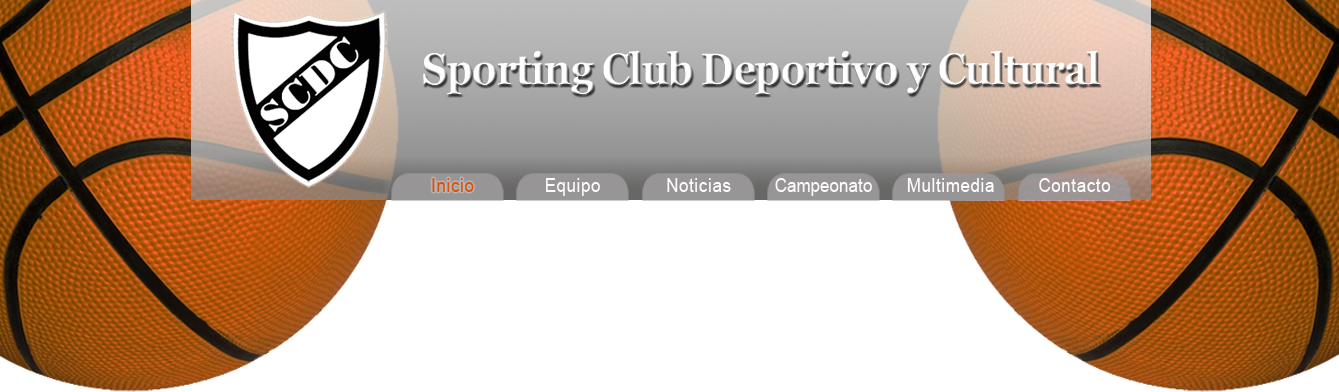
<style>
.page{position:relative;width:1339px;height:392px;background:#ffffff}
.page>*{position:absolute;margin:0}
.t1{font:44.9px "Vani-Bold";letter-spacing:-0.025em;color:#ffffff;scale:0.89 1}
.t2{font:18.6px "ArialMT";letter-spacing:0.05em;color:#da510d;scale:0.89 1}
.t3{font:18.6px "ArialMT";letter-spacing:0.05em;color:#fefdfc;scale:0.89 1}
.t4{font:18.6px "ArialMT";letter-spacing:0.05em;color:#fefcfb;scale:0.89 1}
.t5{font:18.6px "ArialMT";letter-spacing:0.02em;color:#fbfbfb;scale:0.89 1}
.t6{font:18.6px "ArialMT";letter-spacing:0.05em;color:#ffffff;scale:0.89 1}
.t7{font:18.6px "ArialMT";letter-spacing:0.05em;color:#fdfcfb;scale:0.89 1}
</style>
<div class="page">
<p class="t1" style="left:423px;top:51px;width:677px;height:44px">Sporting Club Deportivo y Cultural</p>
<p class="t2" style="left:432px;top:178px;width:42px;height:14px">Inicio</p>
<p class="t3" style="left:546px;top:178px;width:54px;height:18px">Equipo</p>
<p class="t4" style="left:667px;top:178px;width:64px;height:14px">Noticias</p>
<p class="t5" style="left:775px;top:178px;width:97px;height:18px">Campeonato</p>
<p class="t6" style="left:907px;top:178px;width:87px;height:14px">Multimedia</p>
<p class="t7" style="left:1039px;top:178px;width:72px;height:14px">Contacto</p>
</div>
